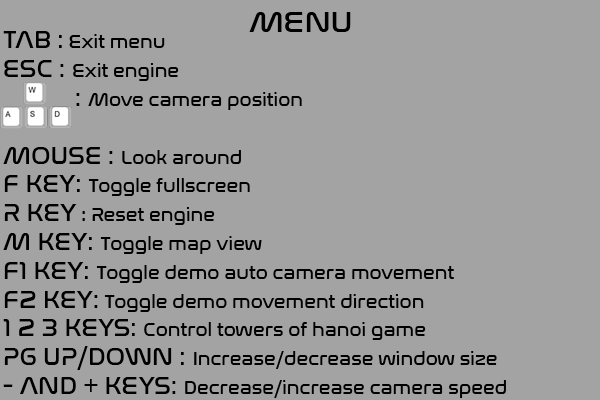
<style>
.page{position:relative;width:600px;height:400px;background:#a3a3a3}
.page>*{position:absolute;margin:0}
.t1{font:30px "NasalizationRg-Regular";color:#000000}
.t2{font:18px "NasalizationRg-Regular";color:#000000}
.t3{font:24px "NasalizationRg-Regular";color:#000000}
</style>
<div class="page">
<p class="t1" style="left:249px;top:12px;width:102px;height:20px">MENU</p>
<p class="t2" style="left:3px;top:31px;width:503px;height:367px"><span class="t3">TAB :</span> Exit menu<br><span class="t3">ESC : </span>Exit engine<br><span class="t3">  : </span>Move camera position<br><span class="t3"><br>MOUSE : </span>Look around<br><span class="t3">F KEY: </span>Toggle fullscreen<br><span class="t3">R KEY</span> : Reset engine<br><span class="t3">M KEY: </span>Toggle map view<br><span class="t3">F1 KEY: </span>Toggle demo auto camera movement<br><span class="t3">F2 KEY:</span> Toggle demo movement direction<br><span class="t3">1 2 3 KEYS: </span>Control towers of hanoi game<br><span class="t3">PG UP/DOWN : </span>Increase/decrease window size<br><span class="t3">- AND + KEYS: </span>Decrease/increase camera speed</p>
</div>
